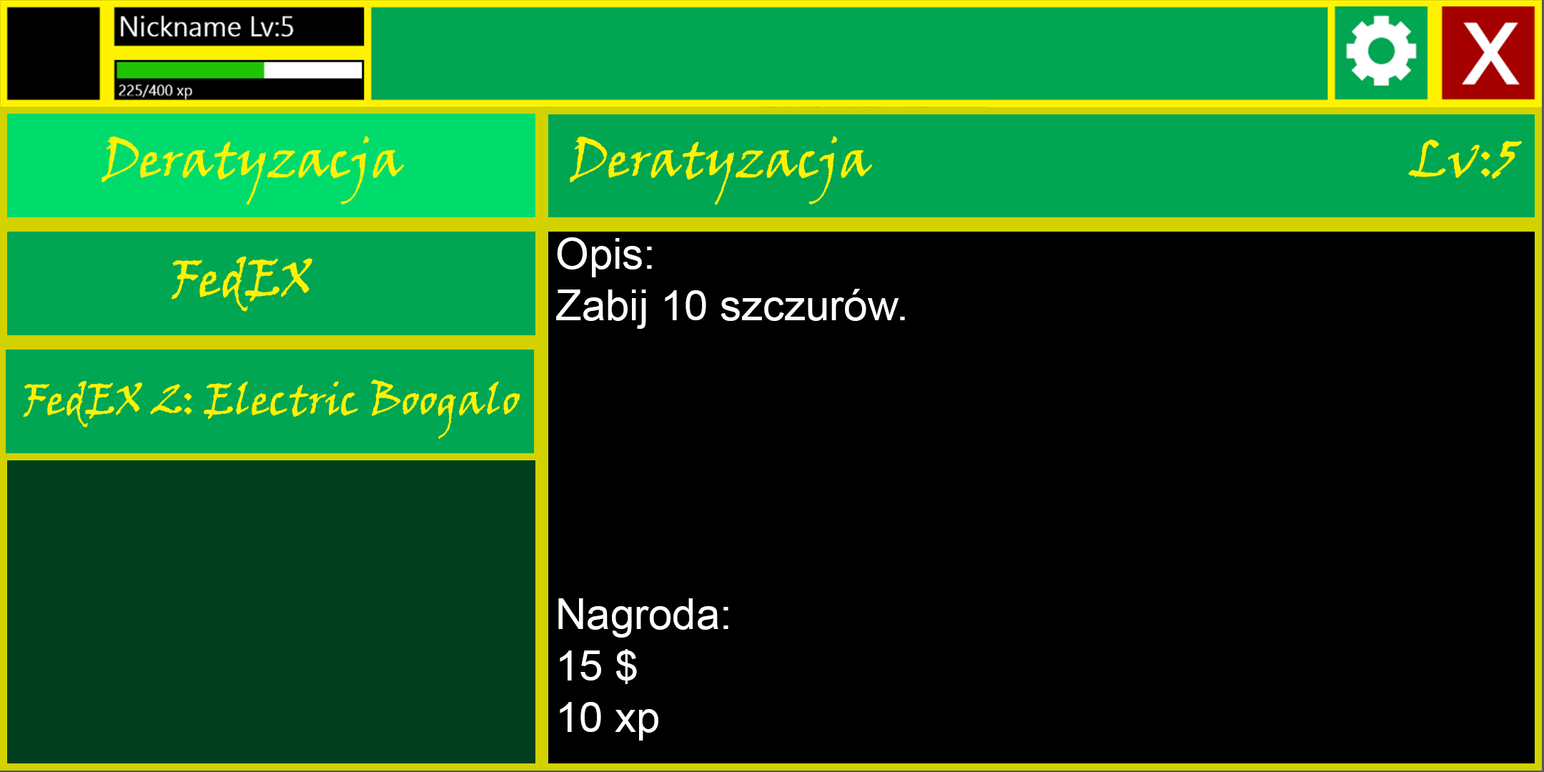
<style>
.page{position:relative;width:1544px;height:772px;background:#000000}
.page>*{position:absolute;margin:0}
.t1{font:50.8px "VinerHandITC";color:#fff200}
.t2{font:42.9px "ArialMT";color:#ffffff}
.t3{font:42.9px "VinerHandITC";color:#fff200}
</style>
<div class="page">
<p class="t1" style="left:102px;top:136px;width:302px;height:69px">Deratyzacja</p>
<p class="t1" style="left:570px;top:136px;width:952px;height:69px">Deratyzacja                                              Lv:5</p>
<p class="t2" style="left:556px;top:237px;width:349px;height:504px">Opis:<br>Zabij 10 szczurów.<br><br><br><br><br><br>Nagroda:<br>15 $<br>10 xp</p>
<p class="t1" style="left:171px;top:256px;width:141px;height:56px">FedEX</p>
<p class="t3" style="left:23px;top:380px;width:497px;height:59px">FedEX 2: Electric Boogalo</p>
</div>
